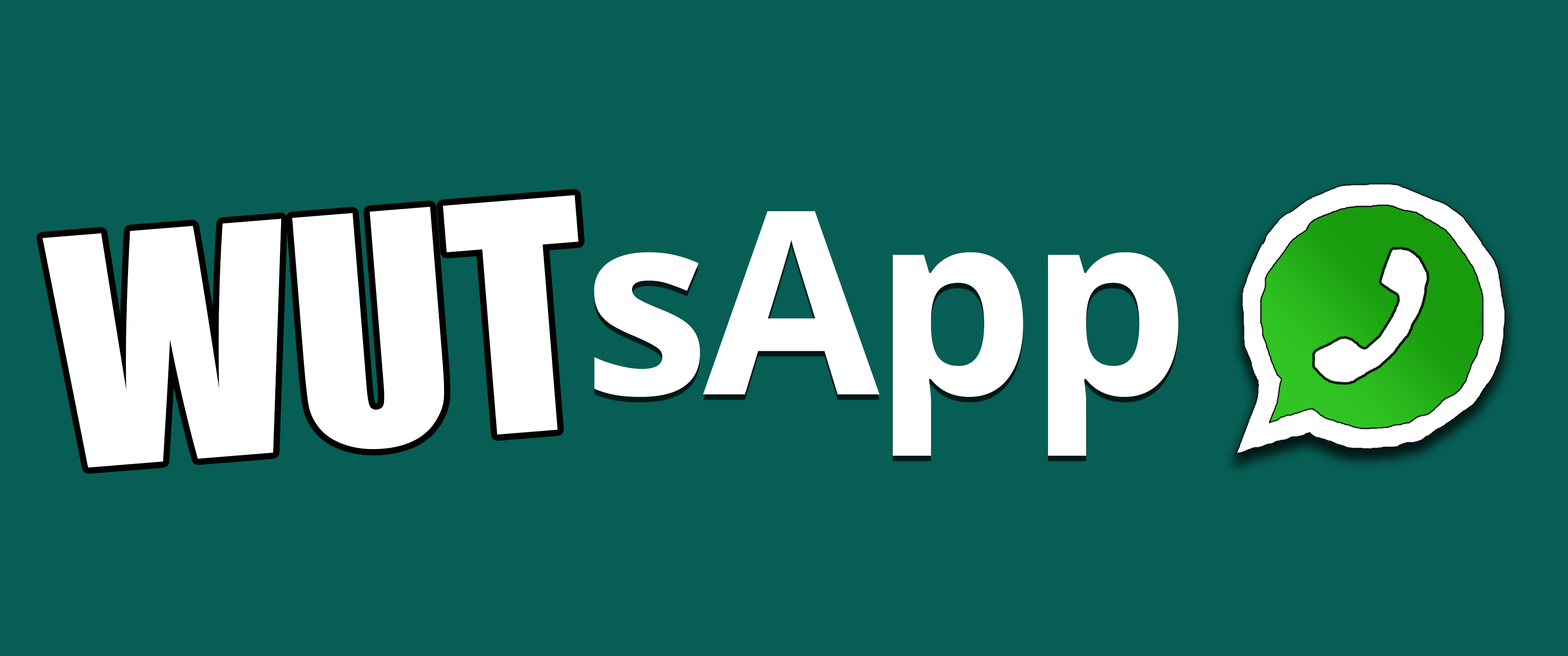
<style>
.page{position:relative;width:1568px;height:656px;background:#075e54}
.page>*{position:absolute;margin:0}
.t1{font:293.8px "Impact";color:#ffffff}
.t2{font:255.2px "OpenSans-Bold";letter-spacing:-0.025em;color:#ffffff}
</style>
<div class="page">
<p class="t1" style="left:42px;top:195px;width:536px;height:273px;rotate:-5deg">WUT</p>
<p class="t2" style="left:594px;top:211px;width:585px;height:245px">sApp</p>
</div>
